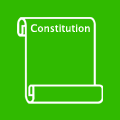
<style>
.page{position:relative;width:120px;height:120px;background:#30ba00}
.page>*{position:absolute;margin:0}
.t1{font:10px "LucidaSansUnicode";color:#ffffff}
</style>
<div class="page">
<p class="t1" style="left:30px;top:24px;width:60px;height:8px">Constitution</p>
</div>
